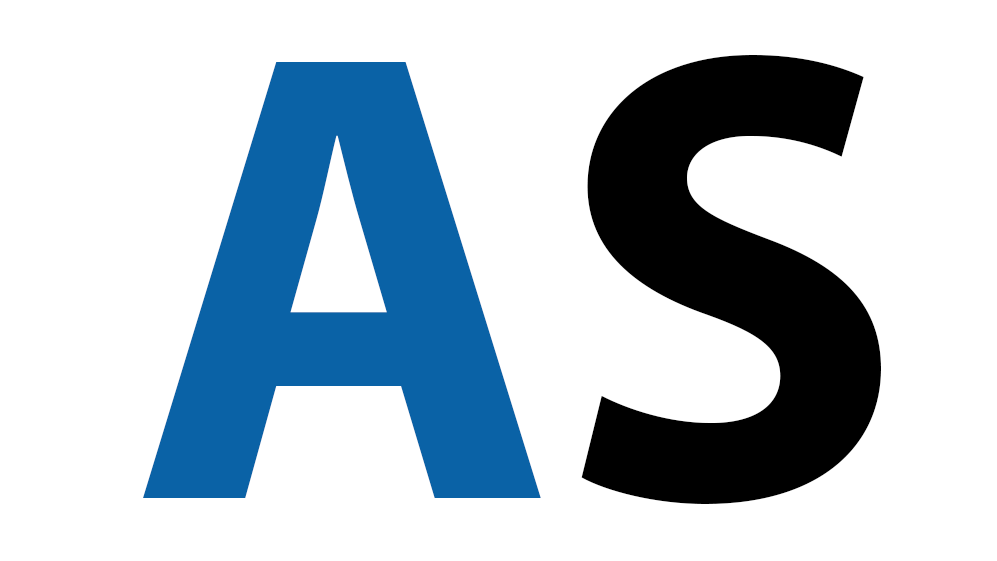
<style>
.page{position:relative;width:997px;height:561px;background:#ffffff}
.page>*{position:absolute;margin:0}
.t1{font:647.5px "MyriadPro-Bold";color:#0a62a6}
.t2{font:647.5px "MyriadPro-Bold";color:#000000}
</style>
<div class="page">
<p class="t1" style="left:143px;top:55px;width:738px;height:450px">A<span class="t2">S</span></p>
</div>
